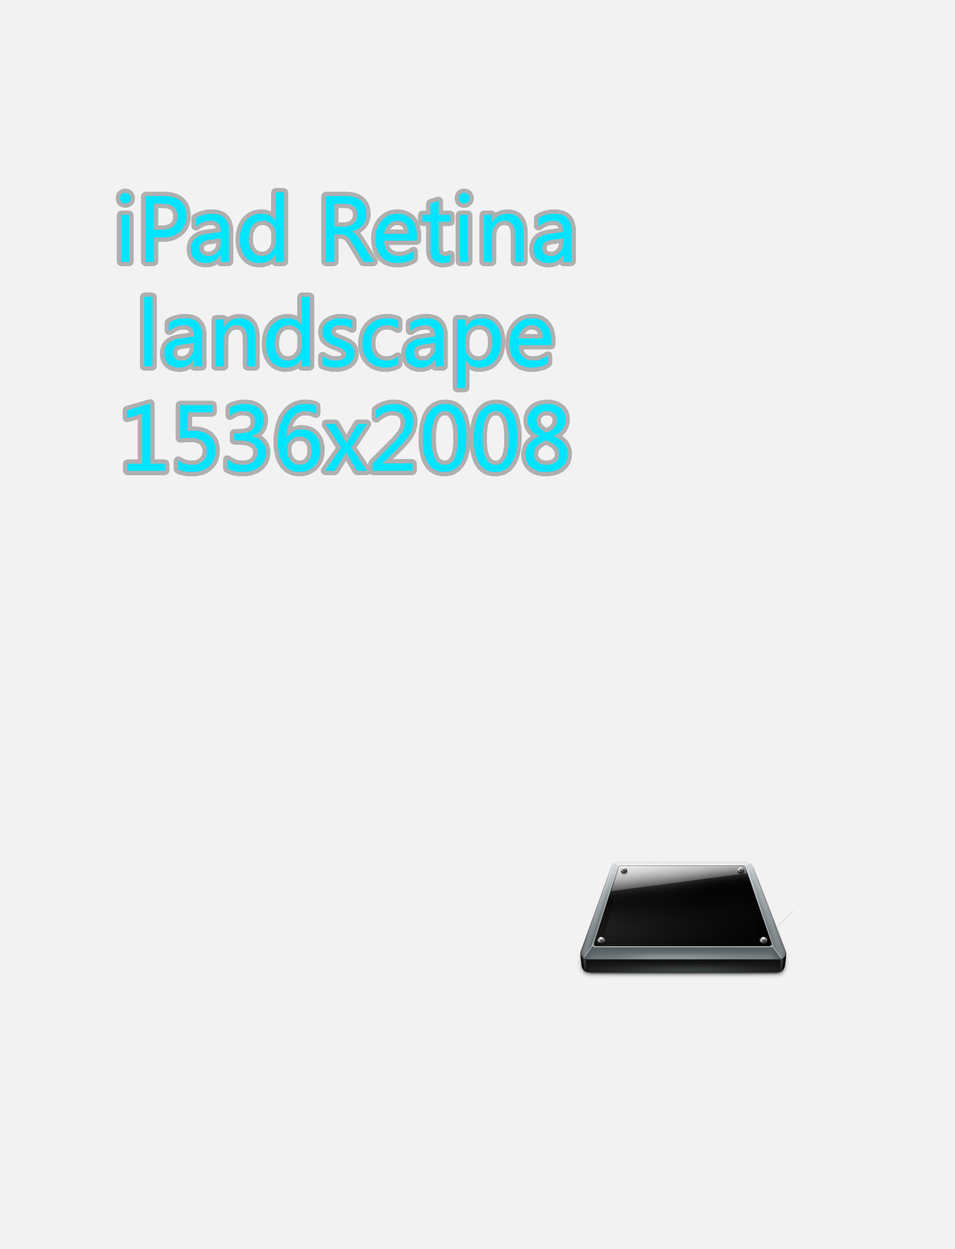
<style>
.page{position:relative;width:955px;height:1249px;background:#f2f2f2}
.page>*{position:absolute;margin:0}
.t1{font:87px "MicrosoftYaHei";color:#00e4ff}
</style>
<div class="page">
<p class="t1" style="left:120px;top:192px;width:452px;height:280px;text-align:center">iPad Retina<br>landscape<br>1536x2008</p>
</div>
